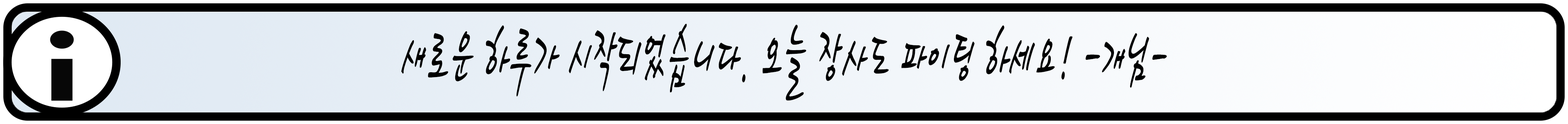
<style>
.page{position:relative;width:1568px;height:124px}
.page>*{position:absolute;margin:0}
.t1{font:80.4px "HaanCjaB";color:#000000;scale:0.47 1}
</style>
<div class="page">
<p class="t1" style="left:401px;top:24px;width:766px;height:77px">새로운 하루가 시작되었습니다. 오늘 장사도 파이팅 하세요! -개님-</p>
</div>
